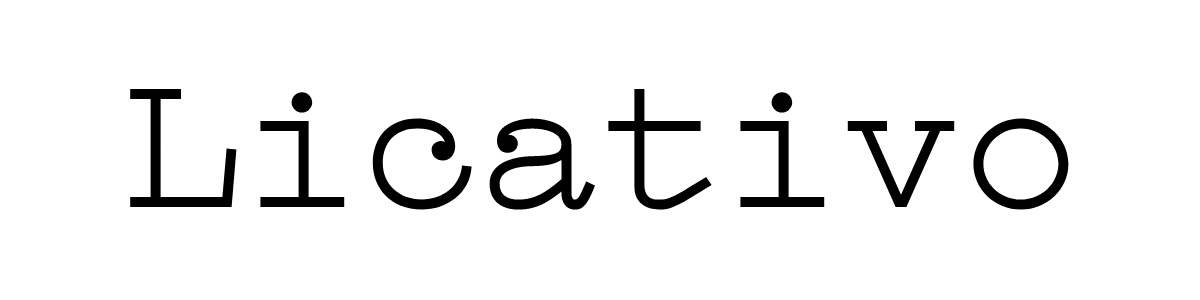
<style>
.page{position:relative;width:1200px;height:300px;background:#ffffff}
.page>*{position:absolute;margin:0}
.t1{font:200px "Compagnon-Roman";color:#000000}
</style>
<div class="page">
<p class="t1" style="left:130px;top:89px;width:939px;height:121px">Licativo</p>
</div>
